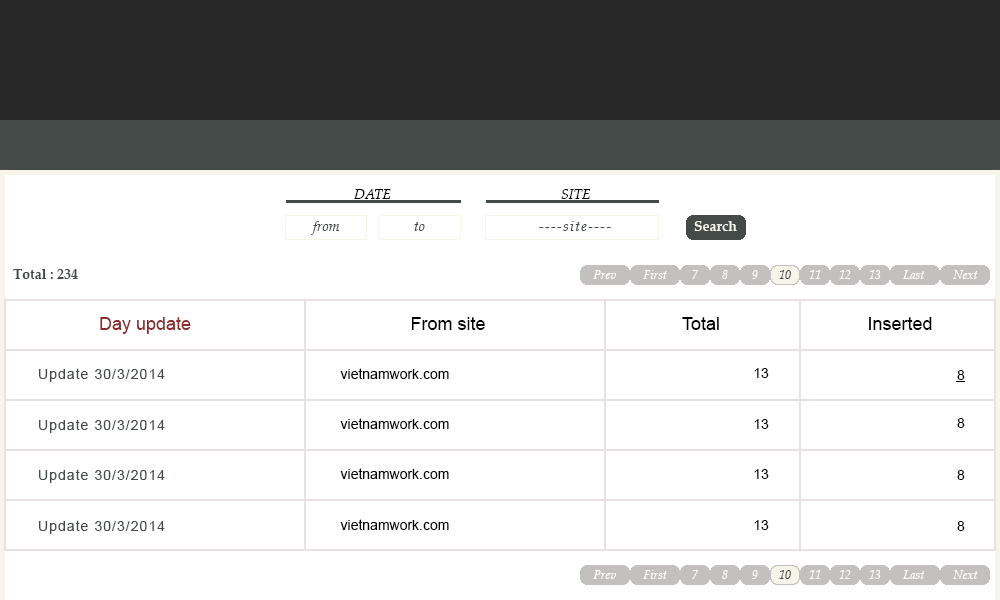
<style>
.page{position:relative;width:1000px;height:600px;background:#ffffff}
.page>*{position:absolute;margin:0}
.t1{font:14px "PalatinoLinotype-Italic";color:#000000}
.t2{font:14px "PalatinoLinotype-Italic";color:#434a48}
.t3{font:14px "PalatinoLinotype-Italic";letter-spacing:0.1em;color:#434a48}
.t4{font:14px "PalatinoLinotype-Bold";color:#f7f4e9}
.t5{font:14px "PalatinoLinotype-Bold";color:#434a48}
.t6{font:12px "PalatinoLinotype-Italic";color:#ffffff}
.t7{font:12px "PalatinoLinotype-Italic";color:#434a48}
.t8{font:18px "ArialMT";color:#8b2c2c}
.t9{font:18px "ArialMT";color:#000000}
.t10{font:14px "ArialMT";letter-spacing:0.075em;color:#434a48}
.t11{font:14px "ArialMT";color:#000000}
</style>
<div class="page">
<p class="t1" style="left:354px;top:189px;width:37px;height:10px">DATE</p>
<p class="t1" style="left:561px;top:189px;width:29px;height:10px">SITE</p>
<p class="t2" style="left:311px;top:221px;width:29px;height:14px">from</p>
<p class="t2" style="left:414px;top:222px;width:11px;height:9px">to</p>
<p class="t3" style="left:539px;top:221px;width:72px;height:10px">----site----</p>
<p class="t4" style="left:694px;top:221px;width:43px;height:10px">Search</p>
<p class="t5" style="left:13px;top:269px;width:65px;height:10px">Total : 234</p>
<p class="t6" style="left:593px;top:270px;width:24px;height:9px">Prev</p>
<p class="t6" style="left:643px;top:270px;width:24px;height:9px">First</p>
<p class="t6" style="left:692px;top:270px;width:6px;height:9px">7</p>
<p class="t6" style="left:722px;top:270px;width:6px;height:9px">8</p>
<p class="t6" style="left:752px;top:270px;width:6px;height:9px">9</p>
<p class="t7" style="left:779px;top:270px;width:12px;height:9px">10</p>
<p class="t6" style="left:809px;top:270px;width:12px;height:9px">11</p>
<p class="t6" style="left:839px;top:270px;width:12px;height:9px">12</p>
<p class="t6" style="left:869px;top:270px;width:12px;height:9px">13</p>
<p class="t6" style="left:903px;top:270px;width:21px;height:9px">Last</p>
<p class="t6" style="left:953px;top:270px;width:25px;height:9px">Next</p>
<p class="t8" style="left:100px;top:317px;width:91px;height:17px">Day update</p>
<p class="t9" style="left:411px;top:317px;width:74px;height:13px">From site</p>
<p class="t9" style="left:682px;top:317px;width:37px;height:13px">Total</p>
<p class="t9" style="left:869px;top:317px;width:63px;height:13px">Inserted</p>
<p class="t10" style="left:39px;top:368px;width:126px;height:14px">Update 30/3/2014</p>
<p class="t11" style="left:340px;top:368px;width:109px;height:11px">vietnamwork.com</p>
<p class="t11" style="left:754px;top:368px;width:15px;height:10px">13</p>
<p class="t11" style="left:957px;top:370px;width:8px;height:10px">8</p>
<p class="t10" style="left:39px;top:419px;width:126px;height:14px">Update 30/3/2014</p>
<p class="t11" style="left:340px;top:418px;width:109px;height:11px">vietnamwork.com</p>
<p class="t11" style="left:754px;top:419px;width:15px;height:10px">13</p>
<p class="t11" style="left:957px;top:418px;width:8px;height:10px">8</p>
<p class="t10" style="left:39px;top:469px;width:126px;height:14px">Update 30/3/2014</p>
<p class="t11" style="left:340px;top:468px;width:109px;height:11px">vietnamwork.com</p>
<p class="t11" style="left:754px;top:469px;width:15px;height:10px">13</p>
<p class="t11" style="left:957px;top:470px;width:8px;height:10px">8</p>
<p class="t10" style="left:39px;top:520px;width:126px;height:14px">Update 30/3/2014</p>
<p class="t11" style="left:340px;top:519px;width:109px;height:11px">vietnamwork.com</p>
<p class="t11" style="left:754px;top:520px;width:15px;height:10px">13</p>
<p class="t11" style="left:957px;top:521px;width:8px;height:10px">8</p>
<p class="t6" style="left:593px;top:570px;width:24px;height:9px">Prev</p>
<p class="t6" style="left:643px;top:570px;width:24px;height:9px">First</p>
<p class="t6" style="left:692px;top:570px;width:6px;height:9px">7</p>
<p class="t6" style="left:722px;top:570px;width:6px;height:9px">8</p>
<p class="t6" style="left:752px;top:570px;width:6px;height:9px">9</p>
<p class="t7" style="left:779px;top:570px;width:12px;height:9px">10</p>
<p class="t6" style="left:809px;top:570px;width:12px;height:9px">11</p>
<p class="t6" style="left:839px;top:570px;width:12px;height:9px">12</p>
<p class="t6" style="left:869px;top:570px;width:12px;height:9px">13</p>
<p class="t6" style="left:903px;top:570px;width:21px;height:9px">Last</p>
<p class="t6" style="left:953px;top:570px;width:25px;height:9px">Next</p>
</div>
